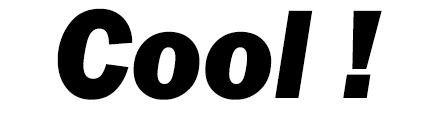
<style>
.page{position:relative;width:439px;height:123px;background:#ffffff}
.page>*{position:absolute;margin:0}
.t1{font:130.5px "FranklinGothic-HeavyItalic";color:#000000;scale:0.94 1}
</style>
<div class="page">
<p class="t1" style="left:57px;top:8px;width:325px;height:92px">Cool !</p>
</div>
